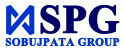
<style>
.page{position:relative;width:124px;height:49px;background:#ffffff}
.page>*{position:absolute;margin:0}
.t1{font:40px "TimesNewRomanPS-BoldMT";color:#000066;font-weight:bold}
.t2{font:11.2px "TimesNewRomanPS-BoldMT";color:#0033cc;font-weight:bold}
</style>
<div class="page">
<p class="t1" style="left:40px;top:5px;width:80px;height:29px">SPG</p>
<p class="t2" style="left:5px;top:37px;width:115px;height:9px">SOBUJPATA GROUP</p>
</div>
